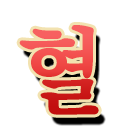
<style>
.page{position:relative;width:128px;height:128px;background:#ffffff}
.page>*{position:absolute;margin:0}
.t1{font:94px "YESMyoungjo-Regular";letter-spacing:0.12em;font-weight:bold}
</style>
<div class="page">
<p class="t1" style="left:19px;top:25px;width:80px;height:90px">혈</p>
</div>
